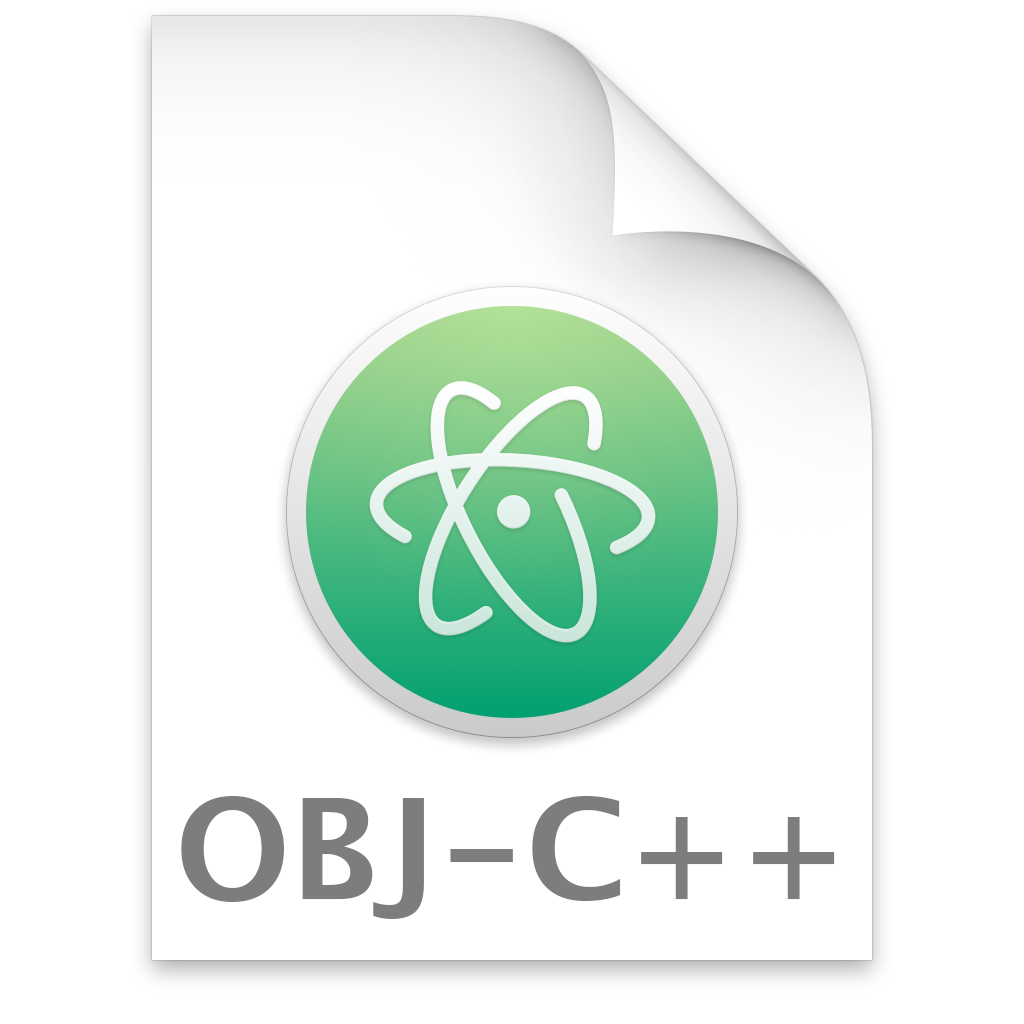
<style>
.page{position:relative;width:1024px;height:1024px;background:#ffffff}
.page>*{position:absolute;margin:0}
.t1{font:140px "LucidaGrande-Bold";color:#7d7d7d}
</style>
<div class="page">
<p class="t1" style="left:181px;top:796px;width:654px;height:123px">OBJ-C++</p>
</div>
